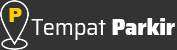
<style>
.page{position:relative;width:177px;height:50px;background:#333333}
.page>*{position:absolute;margin:0}
.t1{font:19.2px "Arial-Black";letter-spacing:-0.05em;color:#ffcc00;scale:1.04 1}
.t2{font:23.7px "Saira-Regular";letter-spacing:-0.01em;color:#ffffff;scale:0.92 1}
.t3{font:23.7px "Saira-Black";letter-spacing:-0.01em;color:#ffffff;scale:0.92 1}
</style>
<div class="page">
<p class="t1" style="left:9px;top:8px;width:13px;height:14px">P</p>
<p class="t2" style="left:31px;top:18px;width:144px;height:22px">Tempat<span class="t3"> Parkir</span></p>
</div>
